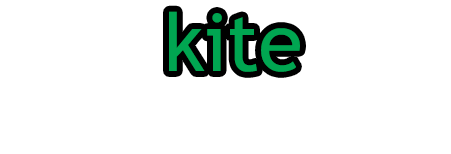
<style>
.page{position:relative;width:451px;height:154px;background:#ffffff}
.page>*{position:absolute;margin:0}
.t1{font:80px "TrebuchetMS";color:#00a651}
</style>
<div class="page">
<p class="t1" style="left:169px;top:11px;width:131px;height:61px">kite</p>
</div>
